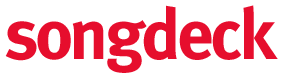
<style>
.page{position:relative;width:282px;height:79px;background:#ffffff}
.page>*{position:absolute;margin:0}
.t1{font:72px "MetaBoldCE-Roman";letter-spacing:-0.05em;color:#e60e2d}
</style>
<div class="page">
<p class="t1" style="left:5px;top:5px;width:273px;height:68px">songdeck</p>
</div>
